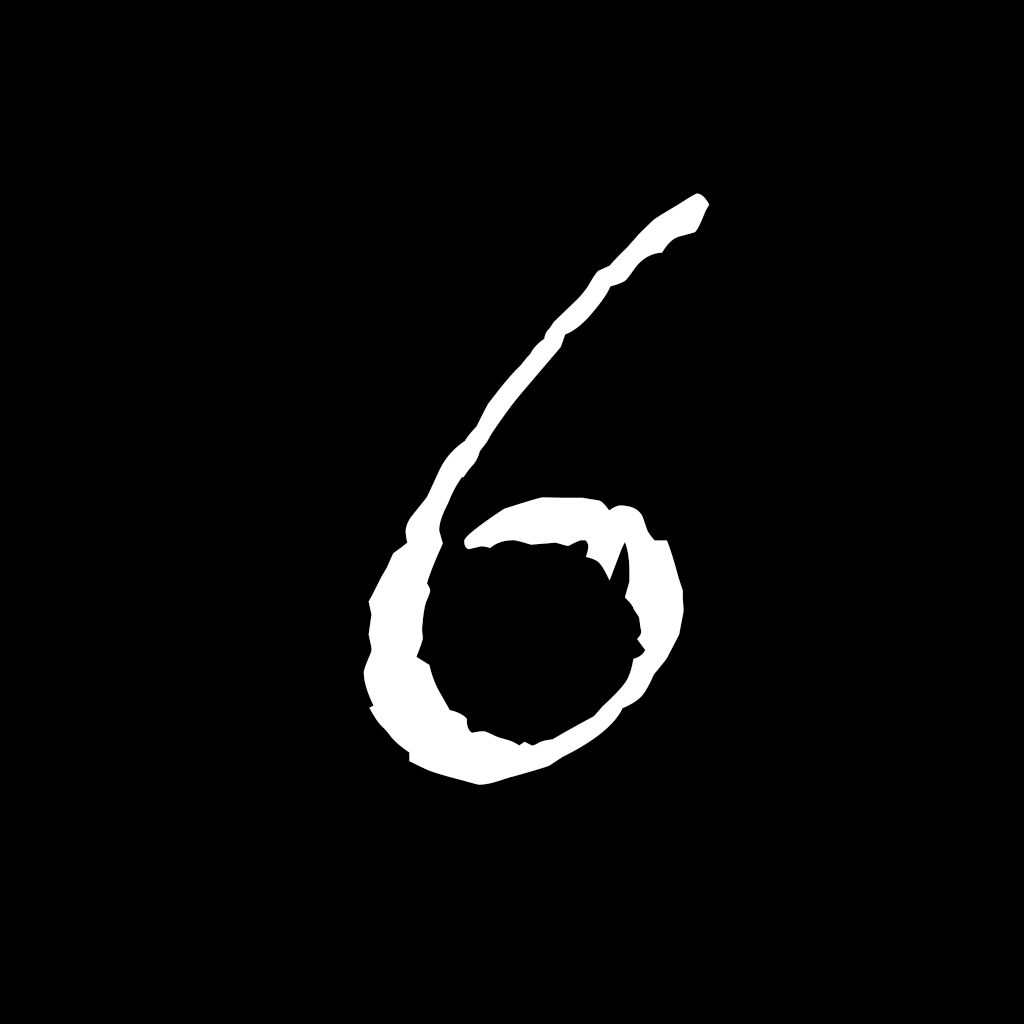
<style>
.page{position:relative;width:1024px;height:1024px;background:#000000}
.page>*{position:absolute;margin:0}
.t1{font:833.3px "Papyrus-Regular";color:#ffffff}
</style>
<div class="page">
<p class="t1" style="left:363px;top:193px;width:347px;height:592px">6</p>
</div>
